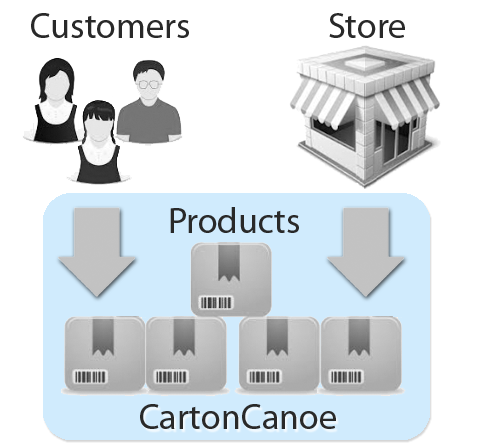
<style>
.page{position:relative;width:485px;height:448px;background:#ffffff}
.page>*{position:absolute;margin:0}
.t1{font:36px "MyriadPro-Regular";color:#292929}
</style>
<div class="page">
<p class="t1" style="left:31px;top:13px;width:158px;height:25px">Customers</p>
<p class="t1" style="left:329px;top:13px;width:76px;height:25px">Store</p>
<p class="t1" style="left:170px;top:207px;width:129px;height:26px">Products</p>
<p class="t1" style="left:140px;top:404px;width:196px;height:25px">CartonCanoe</p>
</div>
